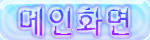
<style>
.page{position:relative;width:150px;height:40px}
.page>*{position:absolute;margin:0}
.t1{font:30.8px "NanumGothic";letter-spacing:0.07em;font-weight:bold;scale:0.91 1}
</style>
<div class="page">
<p class="t1" style="left:20px;top:7px;width:110px;height:29px">메인화면</p>
</div>
